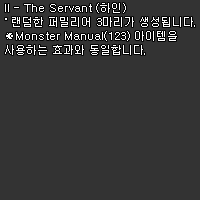
<style>
.page{position:relative;width:200px;height:200px;background:#333333}
.page>*{position:absolute;margin:0}
.t1{font:11px/14px "Dotum";color:#ffffff}
</style>
<div class="page">
<p class="t1" style="left:5px;top:3px;width:190px;height:52px">II - The Servant (하인)<br>˚ 랜덤한 퍼밀리어 3마리가 생성됩니다.<br>※Monster Manual(123) 아이템을<br>사용하는 효과와 동일합니다.</p>
</div>
